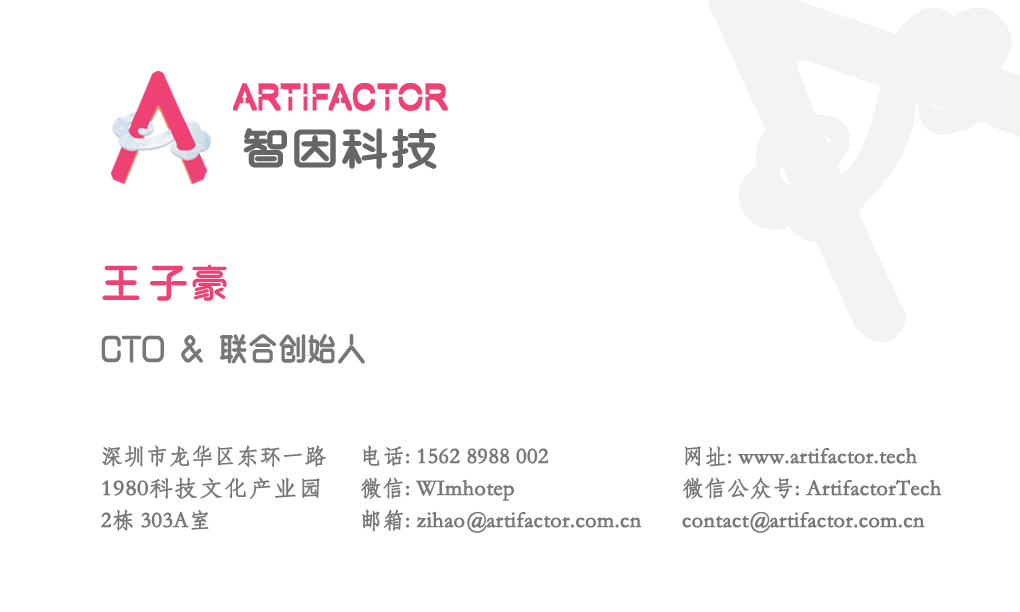
<style>
.page{position:relative;width:1020px;height:612px;background:#ffffff}
.page>*{position:absolute;margin:0}
.t1{font:44px "BENMOXuyuan";color:#666666;font-weight:bold;scale:1.1 1}
.t2{font:32px "BENMOXuyuan";color:#777777;font-weight:bold;scale:0.9 1}
.t3{font:40px "BENMOXuyuan";color:#ee4274;font-weight:bold}
.t4{font:40px "BENMOXuyuan";color:#ee4274}
.t5{font:22px/32px "STFangsong";color:#777777;font-weight:bold;scale:1.1 1}
.t6{font:22px/32px "STFangsong";color:#777777;font-weight:bold}
</style>
<div class="page">
<p class="t1" style="left:243px;top:128px;width:194px;height:41px">智因科技</p>
<p class="t2" style="left:101px;top:264px;width:264px;height:100px"><span class="t3">王 子</span><span class="t4">豪<br></span>CTO &amp; 联合创始人</p>
<p class="t5" style="left:101px;top:445px;width:225px;height:86px"><span class="t6">深圳市龙华区东环一路<br></span>1980科技文化产业园<br><span class="t6">2栋 303A室</span></p>
<p class="t6" style="left:360px;top:445px;width:282px;height:88px">电话: 1562 8988 002<br>微信: WImhotep<br>邮箱: zihao@artifactor.com.cn</p>
<p class="t6" style="left:682px;top:446px;width:260px;height:87px">网址: www.artifactor.tech<br>微信公众号: ArtifactorTech<br>contact@artifactor.com.cn</p>
</div>
